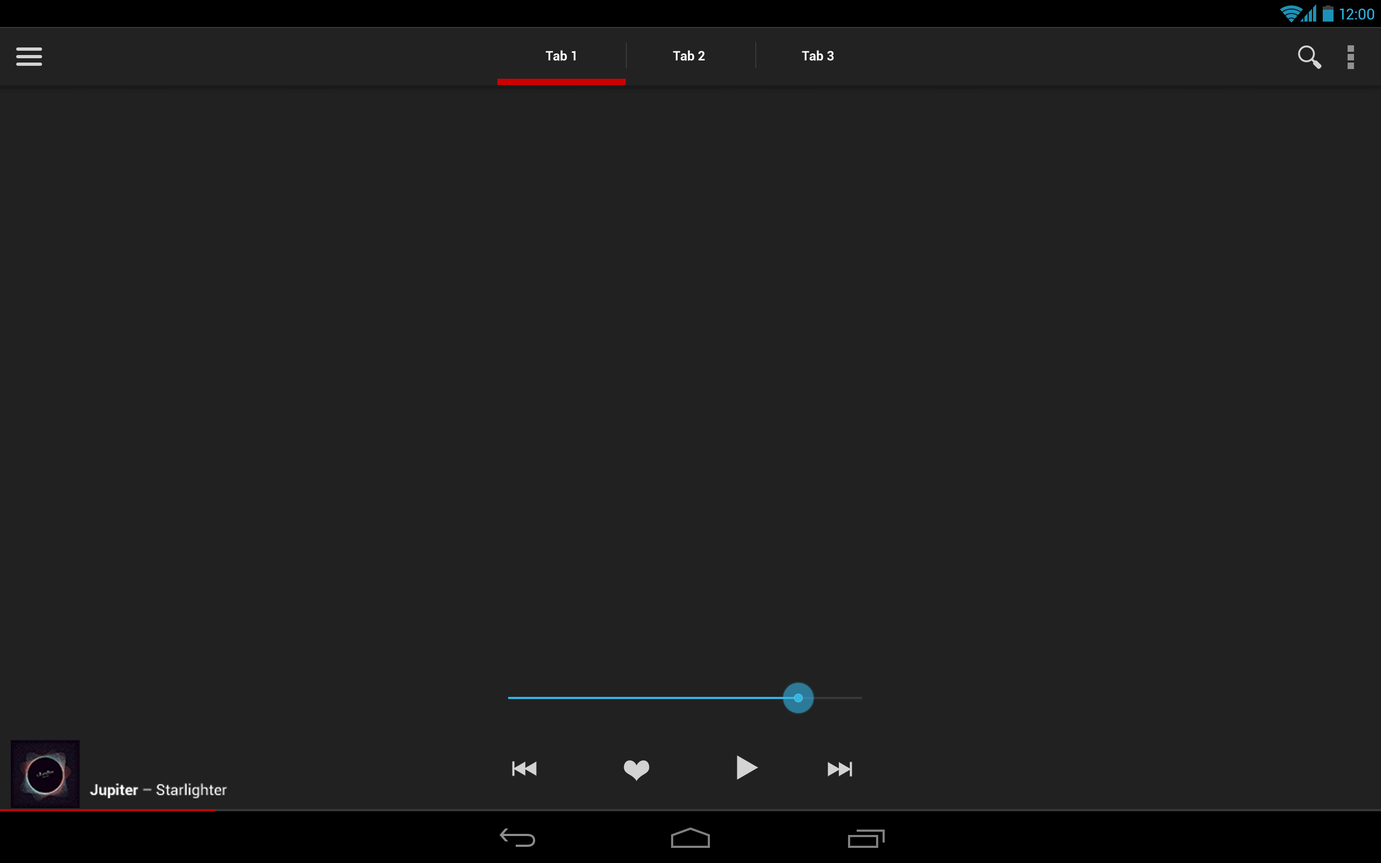
<style>
.page{position:relative;width:1381px;height:863px;background:#212121}
.page>*{position:absolute;margin:0}
.t1{font:15.1px "Roboto-Regular";color:#33b5e5}
.t2{font:12.9px "Roboto-Bold";color:#ffffff}
.t3{font:15.1px "Roboto-Regular";color:#ffffff}
.t4{font:15.1px "Roboto-Bold";color:#ffffff}
</style>
<div class="page">
<p class="t1" style="left:1340px;top:8px;width:35px;height:12px">12:00</p>
<p class="t2" style="left:545px;top:50px;width:31px;height:11px">Tab 1</p>
<p class="t2" style="left:673px;top:50px;width:32px;height:11px">Tab 2</p>
<p class="t2" style="left:802px;top:50px;width:32px;height:11px">Tab 3</p>
<p class="t3" style="left:90px;top:783px;width:138px;height:16px"><span class="t4">Jupiter </span>– Starlighter</p>
</div>
